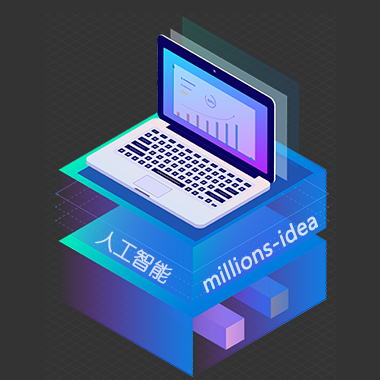
<style>
.page{position:relative;width:380px;height:380px;background:#333333}
.page>*{position:absolute;margin:0}
.t1{font:22px "SegoeUI";color:#d6dff8;font-weight:bold;font-style:italic}
.t2{font:20px "YouYuan";color:#d6e1f7;font-weight:bold}
</style>
<div class="page">
<p class="t1" style="left:203px;top:216px;width:115px;height:77px;rotate:-31deg">millions-idea</p>
<p class="t2" style="left:95px;top:231px;width:78px;height:53px;rotate:31deg">人工智能</p>
</div>
